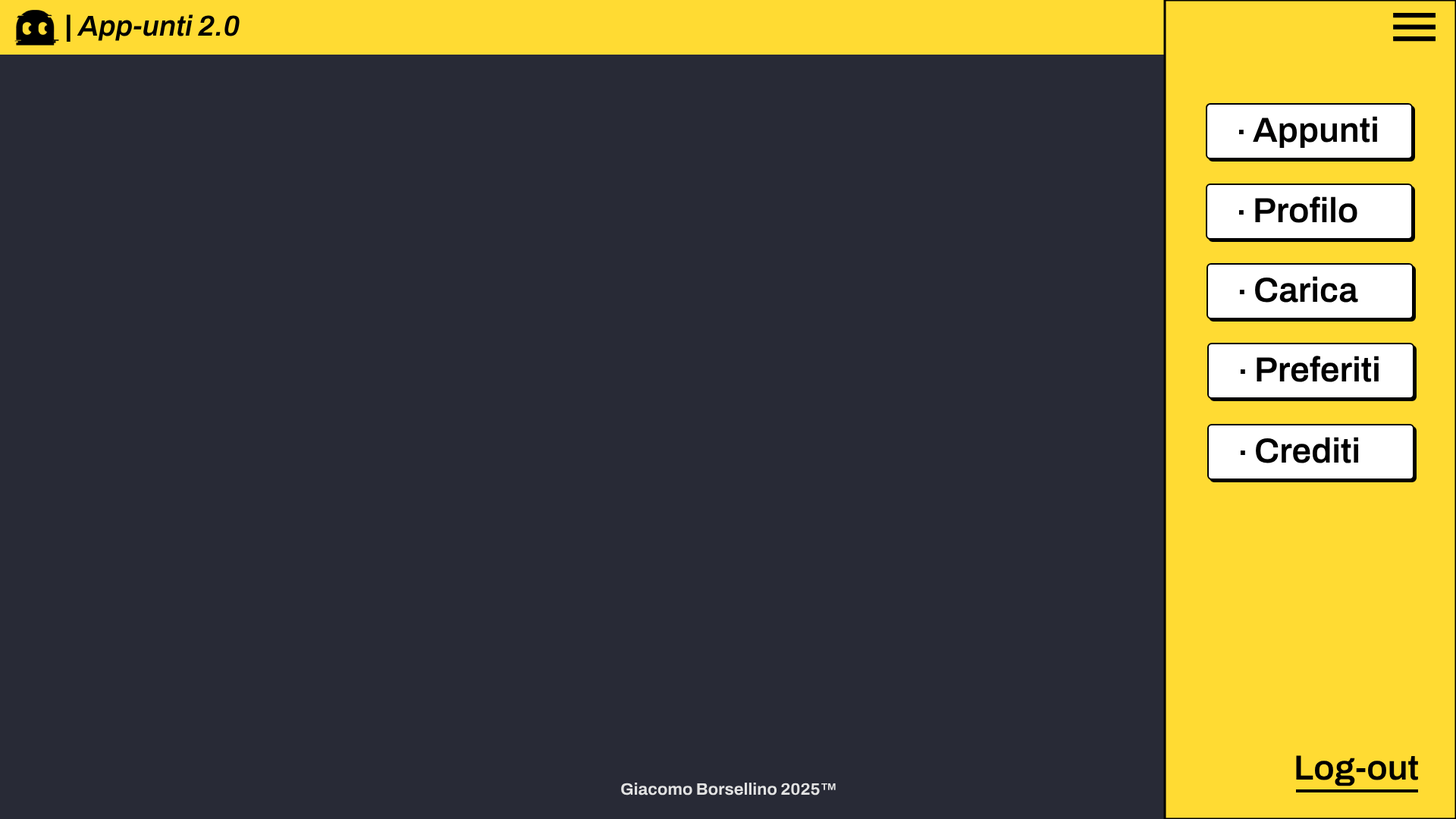
<style>
.page{position:relative;width:1456px;height:819px;background:#282a36}
.page>*{position:absolute;margin:0}
.t1{font:28.8px "Archivo-SemiBoldItalic";color:#000000}
.t2{font:28.8px "ArchivoBlack-Regular";color:#000000}
.t3{font:34.9px "Archivo-SemiBold";color:#000000}
.t4{font:16.7px "Archivo-Bold";color:#e3e3e3}
</style>
<div class="page">
<p class="t1" style="left:66px;top:14px;width:174px;height:28px"><span class="t2">| </span>App-unti 2.0</p>
<p class="t3" style="left:1253px;top:116px;width:124px;height:32px">Appunti</p>
<p class="t3" style="left:1238px;top:130px;width:6px;height:4px">.</p>
<p class="t3" style="left:1255px;top:196px;width:102px;height:27px">Profilo</p>
<p class="t3" style="left:1238px;top:210px;width:6px;height:5px">.</p>
<p class="t3" style="left:1255px;top:276px;width:103px;height:27px">Carica</p>
<p class="t3" style="left:1239px;top:290px;width:5px;height:4px">.</p>
<p class="t3" style="left:1257px;top:356px;width:122px;height:26px">Preferiti</p>
<p class="t3" style="left:1240px;top:369px;width:5px;height:5px">.</p>
<p class="t3" style="left:1256px;top:437px;width:103px;height:26px">Crediti</p>
<p class="t3" style="left:1240px;top:450px;width:5px;height:5px">.</p>
<p class="t3" style="left:1296px;top:755px;width:122px;height:31px">Log-out</p>
<p class="t4" style="left:621px;top:783px;width:215px;height:12px">Giacomo Borsellino 2025™</p>
</div>
